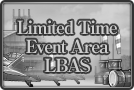
<style>
.page{position:relative;width:134px;height:90px}
.page>*{position:absolute;margin:0}
.t1{font:18px/19px "RyuminPro-ExBold";letter-spacing:-0.08em;color:#cccccc}
</style>
<div class="page">
<p class="t1" style="left:17px;top:20px;width:100px;height:53px;text-align:center">Limited Time<br>Event Area<br>LBAS</p>
</div>
